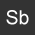
<style>
.page{position:relative;width:35px;height:35px;background:#333333}
.page>*{position:absolute;margin:0}
.t1{font:19.4px "ArialMT";letter-spacing:0.01em;color:#fefefe}
</style>
<div class="page">
<p class="t1" style="left:6px;top:10px;width:23px;height:15px">Sb</p>
</div>
